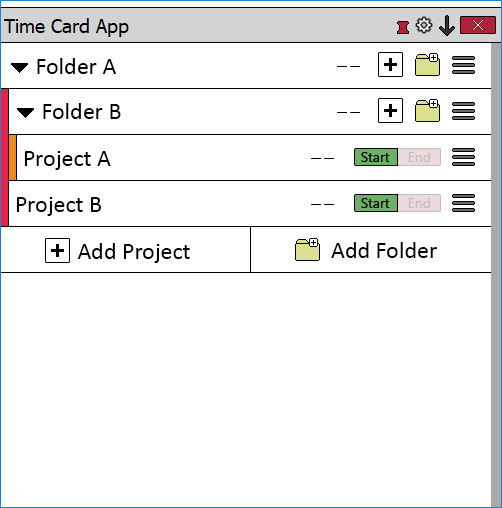
<style>
.page{position:relative;width:502px;height:508px;background:#ffffff}
.page>*{position:absolute;margin:0}
.t1{font:24px "Calibri";color:#000000}
</style>
<div class="page">
<p class="t1" style="left:37px;top:58px;width:79px;height:16px">Folder A</p>
<p class="t1" style="left:43px;top:103px;width:78px;height:16px">Folder B</p>
<p class="t1" style="left:24px;top:151px;width:87px;height:19px">Project A</p>
<p class="t1" style="left:16px;top:197px;width:86px;height:19px">Project B</p>
<p class="t1" style="left:77px;top:243px;width:113px;height:20px">Add Project</p>
<p class="t1" style="left:331px;top:242px;width:106px;height:16px">Add Folder</p>
</div>
